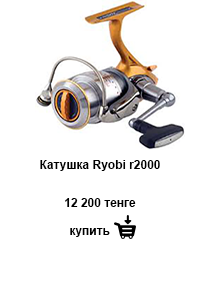
<style>
.page{position:relative;width:220px;height:299px;background:#ffffff}
.page>*{position:absolute;margin:0}
.t1{font:12px "Arial-BoldMT";color:#000000}
</style>
<div class="page">
<p class="t1" style="left:40px;top:160px;width:120px;height:11px">Катушка Ryobi r2000</p>
<p class="t1" style="left:40px;top:160px;width:120px;height:11px">Катушка Ryobi r2000</p>
<p class="t1" style="left:65px;top:198px;width:71px;height:9px">12 200 тенге</p>
<p class="t1" style="left:65px;top:198px;width:71px;height:9px">12 200 тенге</p>
<p class="t1" style="left:70px;top:228px;width:40px;height:9px">купить</p>
<p class="t1" style="left:70px;top:228px;width:40px;height:9px">купить</p>
</div>
